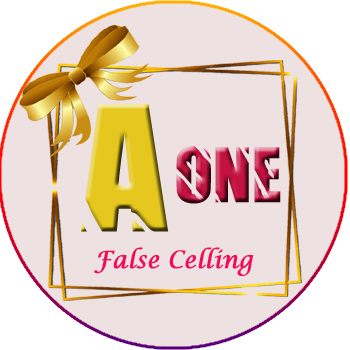
<style>
.page{position:relative;width:350px;height:350px;background:#eee1e1}
.page>*{position:absolute;margin:0}
.t1{font:89.3px "Insomnia-Regular";color:#c41240}
.t2{font:120.5px "Insomnia-Regular";color:#e5c71e}
.t3{font:24px "LucidaCalligraphy-Italic";color:#f40b58;font-weight:bold;scale:0.94 1}
</style>
<div class="page">
<p class="t1" style="left:81px;top:104px;width:200px;height:128px"><span class="t2">A</span>ONE</p>
<p class="t3" style="left:94px;top:247px;width:160px;height:29px">False Celling</p>
</div>
